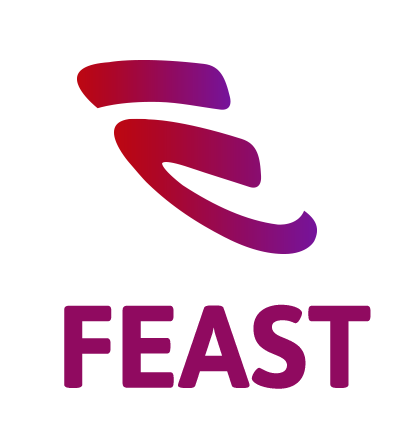
<style>
.page{position:relative;width:402px;height:438px;background:#ffffff}
.page>*{position:absolute;margin:0}
.t1{font:116.6px "Asap-Bold";color:#900a60;text-transform:uppercase}
</style>
<div class="page">
<p class="t1" style="left:64px;top:304px;width:307px;height:85px">Feast</p>
</div>
